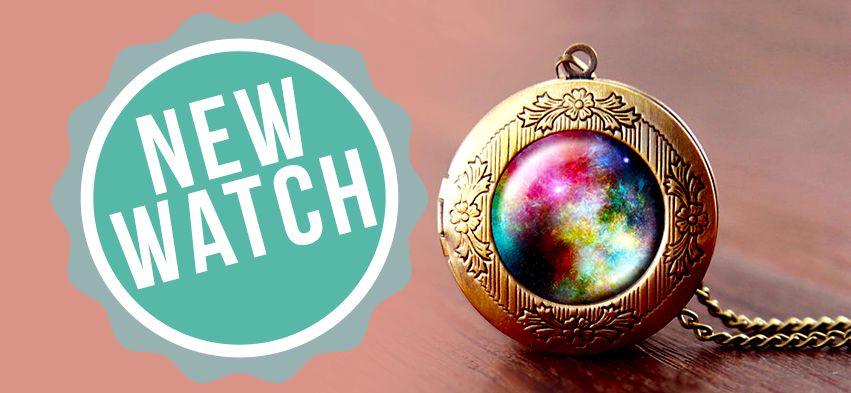
<style>
.page{position:relative;width:851px;height:393px}
.page>*{position:absolute;margin:0}
.t1{font:113.1px/86.5px "BebasNeue";letter-spacing:0.06em;color:#ffffff}
</style>
<div class="page">
<p class="t1" style="left:109px;top:76px;width:269px;height:214px;text-align:center;rotate:-15deg">New <br>Watch</p>
</div>
